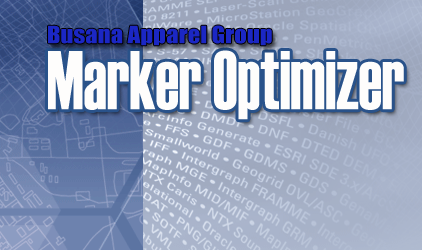
<style>
.page{position:relative;width:422px;height:250px}
.page>*{position:absolute;margin:0}
.t1{font:22.1px "Impact";color:#1b27c4;scale:1.12 1}
.t2{font:83.2px "Haettenschweiler";color:#fefdfc;scale:0.77 1}
</style>
<div class="page">
<p class="t1" style="left:48px;top:25px;width:224px;height:21px">Busana Apparel Group</p>
<p class="t2" style="left:48px;top:50px;width:356px;height:70px">Marker Optimizer</p>
</div>
